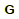
<style>
.page{position:relative;width:19px;height:19px;background:#ffffff}
.page>*{position:absolute;margin:0}
.t1{font:13.2px "ArialRoundedMTBold"}
.t2{font:13.2px "ArialRoundedMTBold";color:#000000}
</style>
<div class="page">
<p class="t1" style="left:4px;top:5px;width:10px;height:9px">G</p>
<p class="t2" style="left:5px;top:5px;width:10px;height:9px">G</p>
</div>
